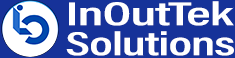
<style>
.page{position:relative;width:235px;height:58px;background:#163299}
.page>*{position:absolute;margin:0}
.t1{font:33.7px "AcuminConcept-CondensedSemibold";letter-spacing:-0.005em;color:#ffffff;scale:1.7 1}
.t2{font:33.9px "AcuminConcept-CondensedSemibold";letter-spacing:-0.005em;color:#ffffff;scale:1.58 1}
</style>
<div class="page">
<p class="t1" style="left:69px;top:1px;width:165px;height:25px">InOutTek</p>
<p class="t2" style="left:66px;top:31px;width:168px;height:25px">Solutions</p>
</div>
